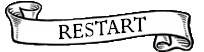
<style>
.page{position:relative;width:204px;height:52px;background:#ffffff}
.page>*{position:absolute;margin:0}
.t1{font:24px "Perpetua";color:#000000}
</style>
<div class="page">
<p class="t1" style="left:58px;top:16px;width:88px;height:24px;rotate:-2deg">RESTART</p>
</div>
